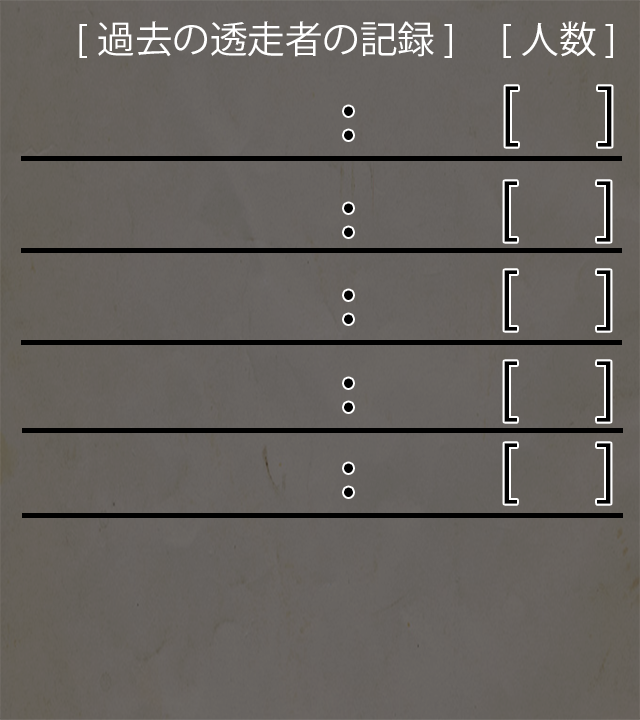
<style>
.page{position:relative;width:640px;height:720px}
.page>*{position:absolute;margin:0}
.t1{font:37.5px "KozGoPr6N-Regular";color:#ffffff}
.t2{font:66.7px "KozGoPr6N-Regular";color:#000000}
.t3{font:58.3px "KozGoPr6N-Regular";color:#000000}
</style>
<div class="page">
<p class="t1" style="left:79px;top:21px;width:373px;height:37px">[過去の透走者の記録]</p>
<p class="t1" style="left:503px;top:21px;width:110px;height:37px">[人数]</p>
<p class="t2" style="left:505px;top:86px;width:107px;height:61px">[     ]</p>
<p class="t3" style="left:345px;top:107px;width:7px;height:32px">:</p>
<p class="t2" style="left:504px;top:181px;width:107px;height:61px">[     ]</p>
<p class="t3" style="left:345px;top:204px;width:7px;height:32px">:</p>
<p class="t2" style="left:504px;top:270px;width:107px;height:61px">[     ]</p>
<p class="t3" style="left:345px;top:291px;width:7px;height:32px">:</p>
<p class="t2" style="left:504px;top:361px;width:107px;height:61px">[     ]</p>
<p class="t3" style="left:345px;top:379px;width:7px;height:32px">:</p>
<p class="t2" style="left:504px;top:443px;width:107px;height:61px">[     ]</p>
<p class="t3" style="left:345px;top:464px;width:7px;height:32px">:</p>
</div>
